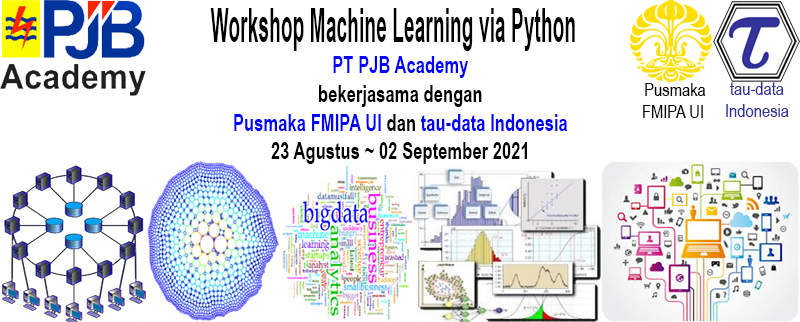
<style>
.page{position:relative;width:800px;height:322px;background:#ffffff}
.page>*{position:absolute;margin:0}
.t1{font:48px "ArialNarrow-Bold";color:#000000;scale:0.49 1}
.t2{font:24px "ArialNarrow-Bold";color:#000000;scale:0.85 1}
.t3{font:24px "ArialNarrow-Bold";color:#0000ff;scale:0.85 1}
.t4{font:18px "ArialNarrow";color:#000000}
.t5{font:18px "ArialNarrow";color:#333399}
</style>
<div class="page">
<p class="t1" style="left:210px;top:8px;width:365px;height:43px">Workshop Machine Learning via Python</p>
<p class="t2" style="left:234px;top:56px;width:334px;height:108px;text-align:center"><span class="t3">PT PJB Academy<br></span>bekerjasama dengan<br><span class="t3">Pusmaka FMIPA UI </span>dan <span class="t3">tau-data Indonesia<br></span>23 Agustus ~ 02 September 2021</p>
<p class="t4" style="left:643px;top:83px;width:63px;height:35px;text-align:center">Pusmaka<br>FMIPA UI</p>
<p class="t5" style="left:726px;top:82px;width:63px;height:35px;text-align:center">tau-data<br>Indonesia</p>
</div>
